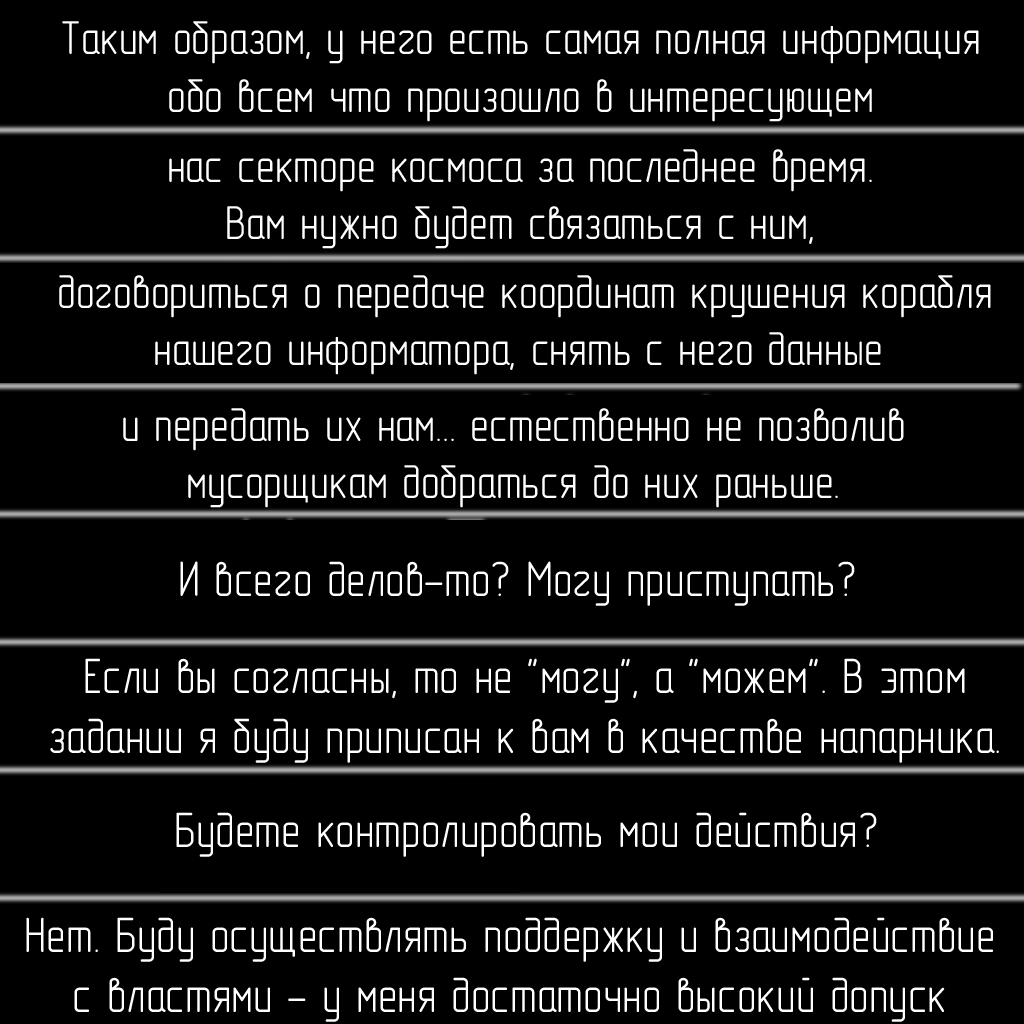
<style>
.page{position:relative;width:1024px;height:1024px;background:#000000}
.page>*{position:absolute;margin:0}
.t1{font:48px "GOST-2.304-81typeA";color:#ffffff}
.t2{font:50px "GOST-2.304-81typeA";color:#ffffff}
</style>
<div class="page">
<p class="t1" style="left:62px;top:21px;width:917px;height:101px;text-align:center">Таким образом, у него есть самая полная информация<br>обо всем что произошло в интересующем</p>
<p class="t1" style="left:169px;top:149px;width:703px;height:100px;text-align:center">нас секторе космоса за последнее время.<br>Вам нужно будет связаться с ним,</p>
<p class="t1" style="left:59px;top:275px;width:932px;height:100px;text-align:center">договориться о передаче координат крушения корабля<br>нашего информатора, снять с него данные</p>
<p class="t1" style="left:123px;top:408px;width:781px;height:100px;text-align:center">и передать их нам... естественно не позволив<br>мусорщикам добраться до них раньше.</p>
<p class="t2" style="left:180px;top:561px;width:675px;height:45px">И всего делов-то? Могу приступать?</p>
<p class="t2" style="left:50px;top:658px;width:949px;height:105px;text-align:center">Если вы согласны, то не "могу", а "можем". В этом<br>задании я буду приписан к вам в качестве напарника.</p>
<p class="t2" style="left:176px;top:812px;width:701px;height:45px">Будете контролировать мои действия?</p>
<p class="t2" style="left:26px;top:917px;width:967px;height:105px;text-align:center">Нет. Буду осуществлять поддержку и взаимодействие<br>с властями - у меня достаточно высокий допуск</p>
</div>
